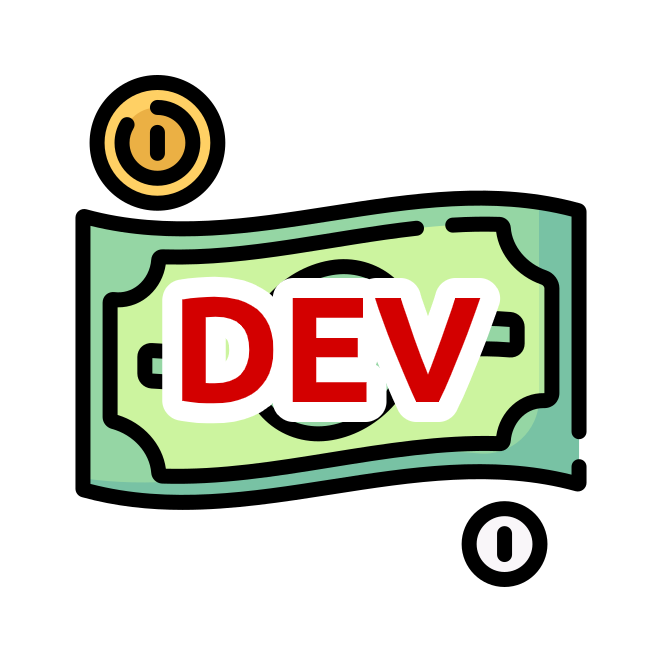
<style>
.page{position:relative;width:662px;height:662px;background:#ffffff}
.page>*{position:absolute;margin:0}
.t1{font:150px "Ubuntu-Bold";color:#d30000}
</style>
<div class="page">
<p class="t1" style="left:182px;top:296px;width:299px;height:108px">DEV</p>
</div>
